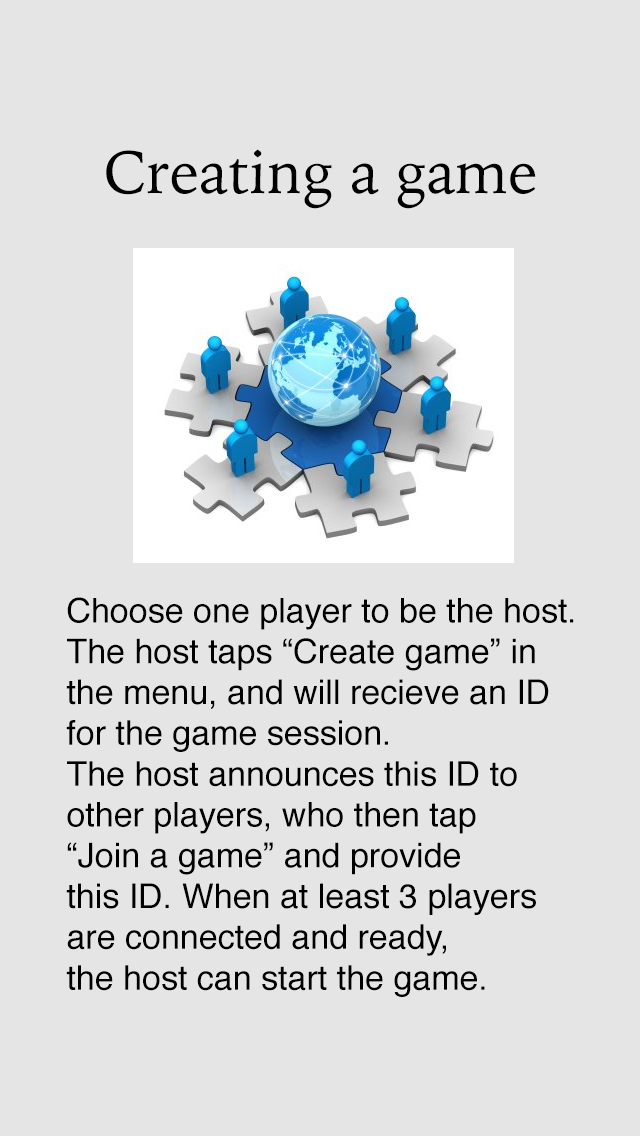
<style>
.page{position:relative;width:640px;height:1136px;background:#e5e5e5}
.page>*{position:absolute;margin:0}
.t1{font:60px "IowanOldStyle-Roman";color:#000000}
.t2{font:34px "Helvetica";color:#000000}
</style>
<div class="page">
<p class="t1" style="left:106px;top:149px;width:430px;height:60px">Creating a game</p>
<p class="t2" style="left:66px;top:597px;width:508px;height:400px">Choose one player to be the host.<br>The host taps “Create game” in<br>the menu, and will recieve an ID<br>for the game session.<br>The host announces this ID to<br>other players, who then tap<br>“Join a game” and provide<br>this ID. When at least 3 players <br>are connected and ready,<br>the host can start the game.</p>
</div>
